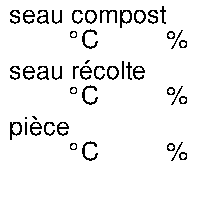
<style>
.page{position:relative;width:200px;height:200px;background:#ffffff}
.page>*{position:absolute;margin:0}
.t1{font:25px/25px "FreeSans";color:#010101}
.t2{font:25px/25px "FreeSans";color:#000000}
</style>
<div class="page">
<p class="t1" style="left:10px;top:6px;width:177px;height:43px">seau compost<br>    °C        %</p>
<p class="t2" style="left:10px;top:60px;width:177px;height:45px">seau récolte<br><span class="t1">    °C        %</span></p>
<p class="t1" style="left:10px;top:116px;width:177px;height:45px"><span class="t2">pièce<br></span>    °C        %</p>
</div>
